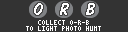
<style>
.page{position:relative;width:128px;height:32px;background:#333333}
.page>*{position:absolute;margin:0}
.t1{font:18px "DomDiagonalBT-Regular";letter-spacing:0.075em;color:#ffffff}
.t2{font:6px "Terminal";color:#ffffff}
</style>
<div class="page">
<p class="t1" style="left:34px;top:3px;width:9px;height:12px">O</p>
<p class="t1" style="left:60px;top:3px;width:9px;height:12px">R</p>
<p class="t1" style="left:86px;top:3px;width:9px;height:12px">B</p>
<p class="t2" style="left:26px;top:26px;width:75px;height:5px">TO LIGHT PHOTO HUNT</p>
<p class="t2" style="left:38px;top:20px;width:51px;height:5px">COLLECT O-R-B</p>
</div>
